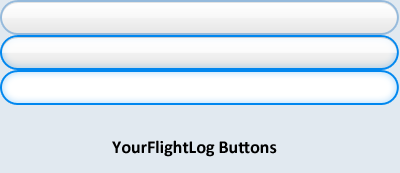
<style>
.page{position:relative;width:400px;height:173px;background:#e1e9f0}
.page>*{position:absolute;margin:0}
.t1{font:18px "Calibri-Bold";color:#000000}
</style>
<div class="page">
<p class="t1" style="left:112px;top:140px;width:165px;height:17px">YourFlightLog Buttons</p>
</div>
